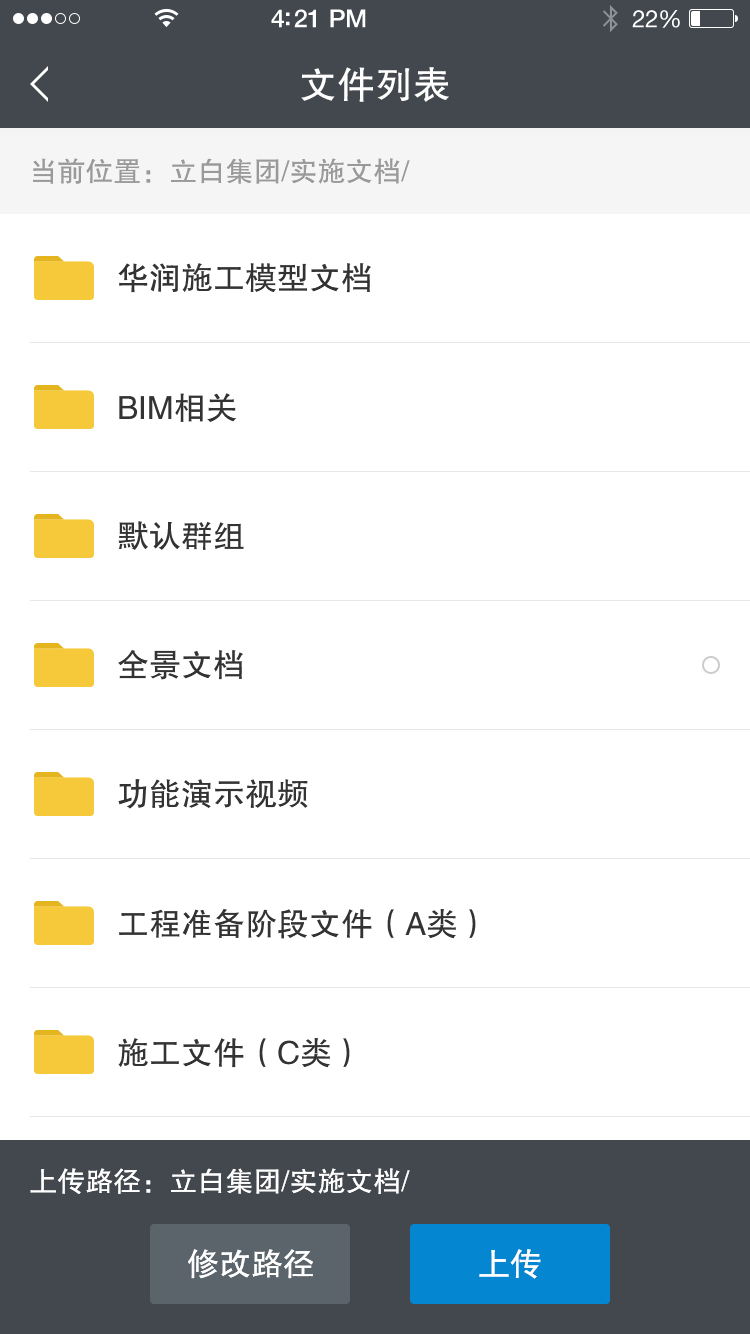
<style>
.page{position:relative;width:750px;height:1334px;background:#ffffff}
.page>*{position:absolute;margin:0}
.t1{font:38px "FZHTJW--GB1-0";color:#ffffff}
.t2{font:28px "FZHTJW--GB1-0";color:#999999}
.t3{font:32px "FZHTJW--GB1-0";color:#333333}
.t4{font:28px "FZHTJW--GB1-0";color:#ffffff}
.t5{font:32px "FZHTJW--GB1-0";color:#ffffff}
</style>
<div class="page">
<p class="t1" style="left:301px;top:67px;width:148px;height:35px">文件列表</p>
<p class="t2" style="left:33px;top:158px;width:377px;height:26px">当前位置：立白集团/实施文档/</p>
<p class="t3" style="left:118px;top:263px;width:253px;height:30px">华润施工模型文档</p>
<p class="t3" style="left:119px;top:393px;width:118px;height:29px">BIM相关</p>
<p class="t3" style="left:118px;top:521px;width:126px;height:29px">默认群组</p>
<p class="t3" style="left:118px;top:650px;width:125px;height:30px">全景文档</p>
<p class="t3" style="left:118px;top:779px;width:190px;height:30px">功能演示视频</p>
<p class="t3" style="left:119px;top:909px;width:357px;height:30px">工程准备阶段文件（A类）</p>
<p class="t3" style="left:118px;top:1038px;width:232px;height:30px">施工文件（C类）</p>
<p class="t4" style="left:30px;top:1168px;width:380px;height:26px">上传路径：立白集团/实施文档/</p>
<p class="t5" style="left:188px;top:1249px;width:125px;height:30px">修改路径</p>
<p class="t5" style="left:479px;top:1249px;width:62px;height:30px">上传</p>
</div>
